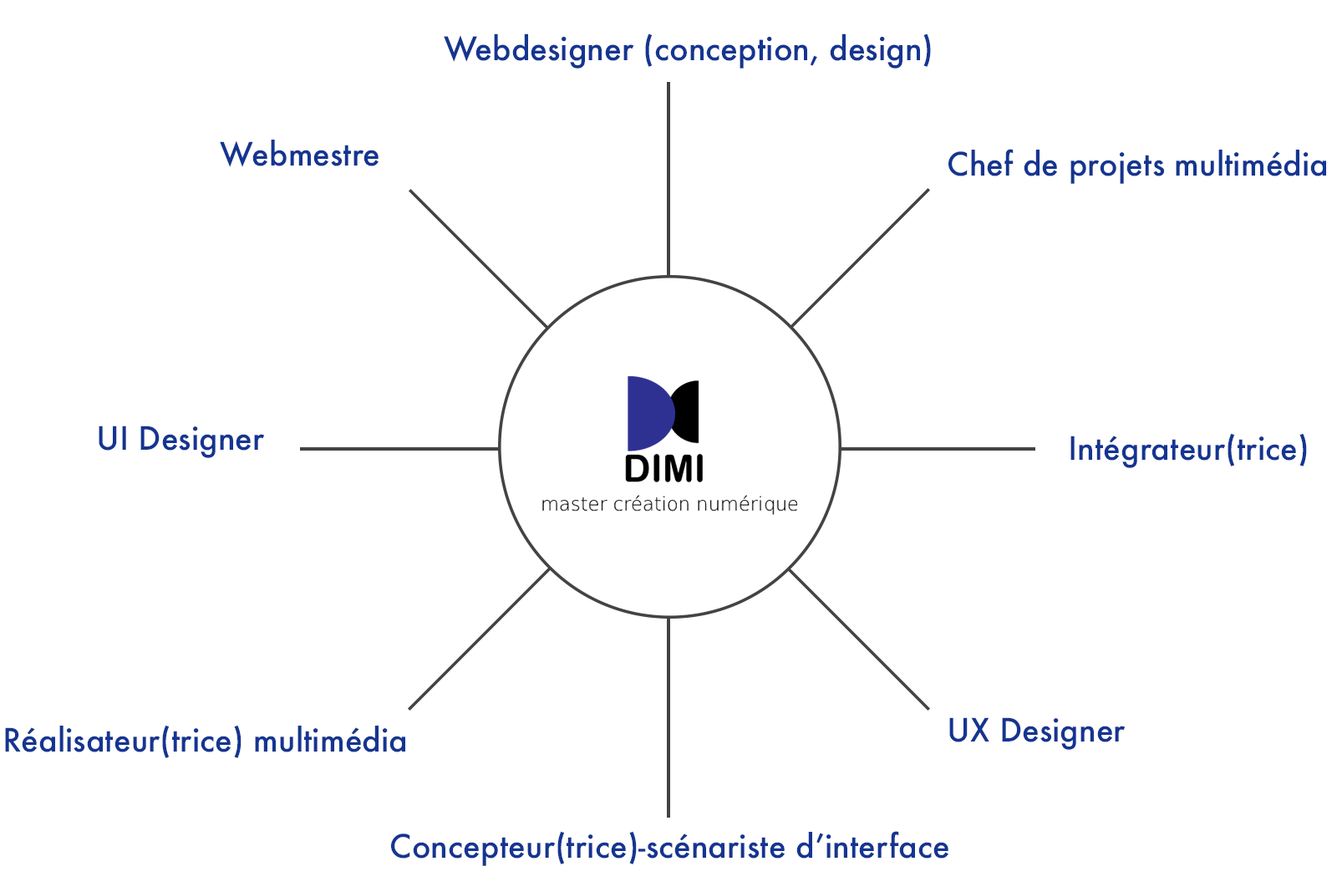
<style>
.page{position:relative;width:1337px;height:892px;background:#ffffff}
.page>*{position:absolute;margin:0}
.t1{font:31.5px "Futura-Medium";color:#143591}
.t2{font:31.4px "Futura-Medium";color:#143591}
</style>
<div class="page">
<p class="t1" style="left:444px;top:33px;width:487px;height:36px">Webdesigner (conception, design)</p>
<p class="t2" style="left:220px;top:140px;width:159px;height:27px">Webmestre</p>
<p class="t2" style="left:949px;top:149px;width:377px;height:35px">Chef de projets multimédia</p>
<p class="t2" style="left:99px;top:425px;width:166px;height:33px">UI Designer</p>
<p class="t2" style="left:1071px;top:433px;width:236px;height:35px">Intégrateur(trice)</p>
<p class="t2" style="left:5px;top:725px;width:400px;height:33px">Réalisateur(trice) multimédia</p>
<p class="t2" style="left:949px;top:717px;width:177px;height:33px">UX Designer</p>
<p class="t2" style="left:391px;top:831px;width:558px;height:35px">Concepteur(trice)-scénariste d’interface</p>
</div>
